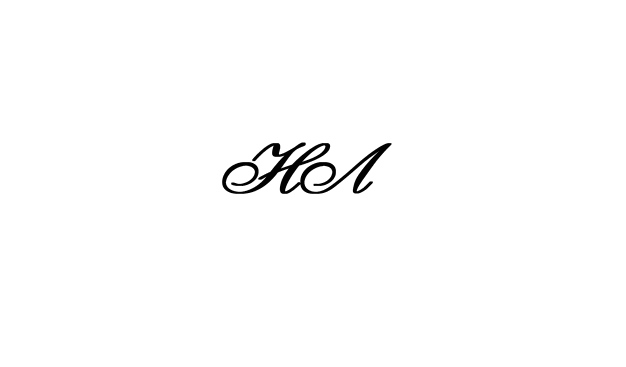
<style>
.page{position:relative;width:626px;height:367px;background:#ffffff}
.page>*{position:absolute;margin:0}
.t1{font:72px "AnastasiaScriptC";color:#020202;font-weight:bold;font-style:italic}
</style>
<div class="page">
<p class="t1" style="left:222px;top:142px;width:170px;height:52px">НЛ</p>
</div>
